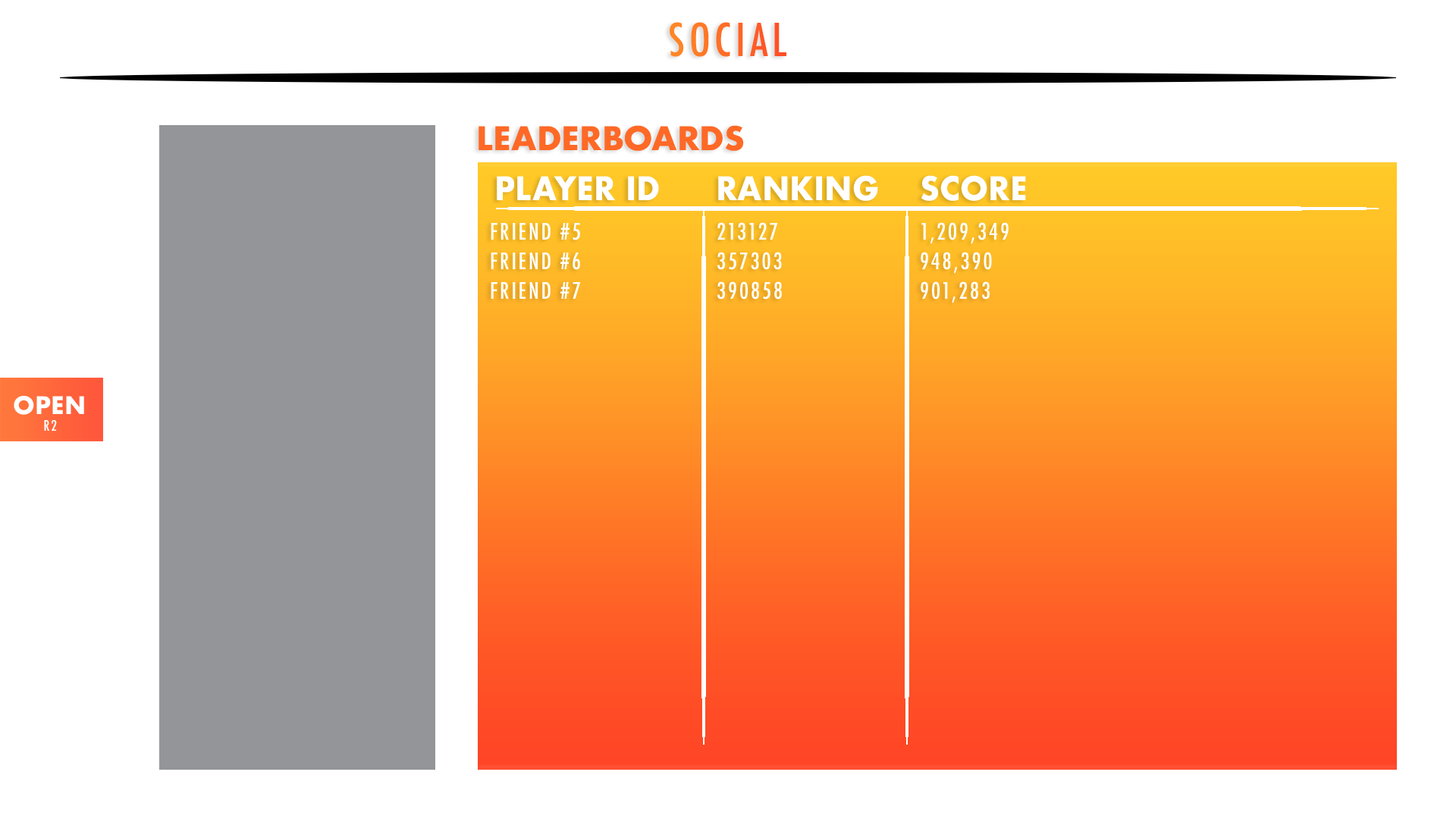
<style>
.page{position:relative;width:1456px;height:819px;background:#ffffff}
.page>*{position:absolute;margin:0}
.t1{font:44.2px "Futura-CondensedMedium";letter-spacing:0.1em}
.t2{font:31.6px "Futura-Bold";color:#ff6926}
.t3{font:31.6px "Futura-Bold";color:#ffffff;scale:0.96 1}
.t4{font:22.1px "Futura-CondensedMedium";letter-spacing:0.1em;color:#ffffff}
.t5{font:23.6px "Futura-Bold";color:#ffffff}
.t6{font:14.1px "Futura-CondensedMedium";letter-spacing:0.1em;color:#ffffff}
</style>
<div class="page">
<p class="t1" style="left:670px;top:22px;width:116px;height:35px">SOCIAL</p>
<p class="t2" style="left:479px;top:125px;width:265px;height:26px">LEADERBOARDS</p>
<p class="t3" style="left:497px;top:176px;width:162px;height:24px">PLAYER ID</p>
<p class="t3" style="left:718px;top:175px;width:160px;height:26px">RANKING</p>
<p class="t3" style="left:921px;top:175px;width:105px;height:26px">SCORE</p>
<p class="t4" style="left:491px;top:223px;width:89px;height:17px">FRIEND #5</p>
<p class="t4" style="left:717px;top:222px;width:61px;height:18px">213127</p>
<p class="t4" style="left:921px;top:222px;width:88px;height:22px">1,209,349</p>
<p class="t4" style="left:491px;top:253px;width:89px;height:17px">FRIEND #6</p>
<p class="t4" style="left:717px;top:252px;width:65px;height:18px">357303</p>
<p class="t4" style="left:921px;top:252px;width:71px;height:22px">948,390</p>
<p class="t4" style="left:717px;top:281px;width:65px;height:19px">390858</p>
<p class="t4" style="left:921px;top:281px;width:69px;height:22px">901,283</p>
<p class="t4" style="left:491px;top:282px;width:90px;height:17px">FRIEND #7</p>
<p class="t5" style="left:14px;top:396px;width:70px;height:19px">OPEN</p>
<p class="t6" style="left:44px;top:419px;width:13px;height:12px">R2</p>
</div>
